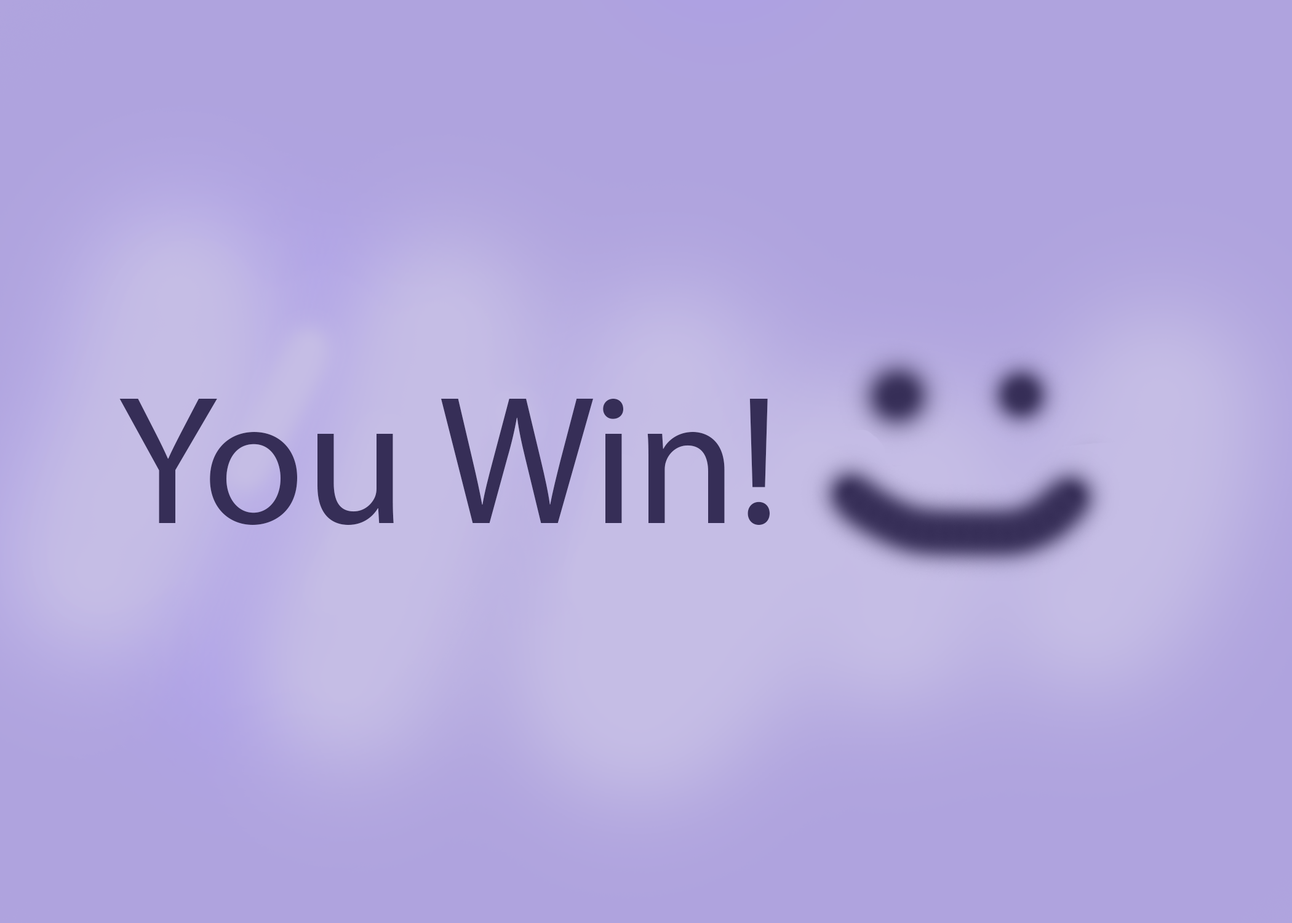
<style>
.page{position:relative;width:1292px;height:923px;background:#afa3de}
.page>*{position:absolute;margin:0}
.t1{font:184.6px "MyriadPro-Regular";color:#362e57}
</style>
<div class="page">
<p class="t1" style="left:119px;top:398px;width:651px;height:127px">You Win!</p>
</div>
